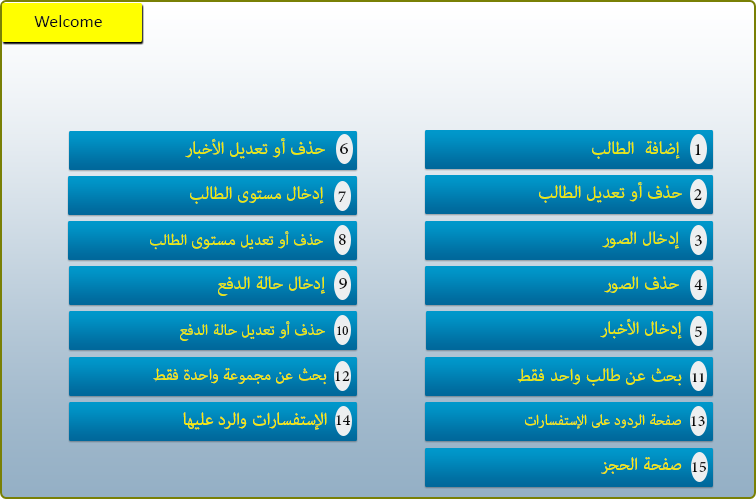
<style>
.page{position:relative;width:756px;height:500px}
.page>*{position:absolute;margin:0}
.t1{font:18px "Calibri";color:#0f0f0f}
.t2{font:24px "AdobeArabic-Regular";color:#eeeb07}
.t3{font:24px "AdobeArabic-Regular";color:#0f0f0f}
.t4{font:24px "AdobeArabic-Regular";color:#121212}
.t5{font:24px "AdobeArabic-Regular";color:#232323}
.t6{font:24px "AdobeArabic-Regular"}
.t7{font:21px "AdobeArabic-Regular";color:#eeeb07}
.t8{font:24px "AdobeArabic-Regular";color:#151515}
.t9{font:24px "AdobeArabic-Regular";color:#181818}
.t10{font:24px "AdobeArabic-Regular";color:#0c0c0c}
.t11{font:18px "AdobeArabic-Regular";color:#141414}
.t12{font:24px "AdobeArabic-Regular";color:#1d1d1d}
.t13{font:22px "AdobeArabic-Regular";color:#f9eb06}
.t14{font:22px "AdobeArabic-Regular";color:#0e0e0e}
.t15{font:20px "AdobeArabic-Bold";color:#0f0f0f}
.t16{font:24px "AdobeArabic-Regular";color:#f9eb06}
.t17{font:20px "AdobeArabic-Regular";color:#f9eb06}
.t18{font:22px "AdobeArabic-Regular";color:#111111}
.t19{font:22px "AdobeArabic-Regular";color:#161616}
</style>
<div class="page">
<p class="t1" style="left:34px;top:15px;width:68px;height:12px">Welcome</p>
<p class="t2" style="left:185px;top:138px;width:140px;height:21px">حذف أو تعديل الأخبار</p>
<p class="t3" style="left:340px;top:143px;width:8px;height:11px">6</p>
<p class="t2" style="left:592px;top:141px;width:88px;height:18px">إضافة  الطالب</p>
<p class="t4" style="left:695px;top:144px;width:6px;height:11px">1</p>
<p class="t2" style="left:539px;top:182px;width:143px;height:21px">حذف أو تعديل الطالب</p>
<p class="t2" style="left:190px;top:186px;width:134px;height:18px">إدخال مستوى الطالب</p>
<p class="t5" style="left:338px;top:191px;width:8px;height:11px">7</p>
<p class="t6" style="left:694px;top:189px;width:8px;height:11px">2</p>
<p class="t7" style="left:150px;top:231px;width:173px;height:19px">حذف أو تعديل <span class="t2">مستوى</span> الطالب</p>
<p class="t2" style="left:602px;top:231px;width:77px;height:18px">إدخال الصور</p>
<p class="t8" style="left:339px;top:234px;width:7px;height:11px">8</p>
<p class="t8" style="left:695px;top:235px;width:7px;height:11px">3</p>
<p class="t2" style="left:218px;top:276px;width:107px;height:20px">إدخال حالة الدفع</p>
<p class="t9" style="left:339px;top:278px;width:8px;height:11px">9</p>
<p class="t2" style="left:604px;top:276px;width:75px;height:17px">حذف الصور</p>
<p class="t10" style="left:694px;top:279px;width:9px;height:11px">4</p>
<p class="t2" style="left:600px;top:318px;width:82px;height:21px">إدخال الأخبار</p>
<p class="t7" style="left:180px;top:321px;width:145px;height:20px">حذف أو تعديل حالة الدفع</p>
<p class="t11" style="left:337px;top:326px;width:11px;height:9px">10</p>
<p class="t12" style="left:694px;top:326px;width:8px;height:11px">5</p>
<p class="t13" style="left:153px;top:368px;width:174px;height:17px">بحث عن مجموعة واحدة فقط</p>
<p class="t14" style="left:335px;top:371px;width:15px;height:10px">12</p>
<p class="t2" style="left:517px;top:367px;width:165px;height:19px">بحث عن طالب واحد فقط</p>
<p class="t15" style="left:692px;top:373px;width:12px;height:9px">11</p>
<p class="t16" style="left:183px;top:412px;width:144px;height:18px">الإستفسارات والرد عليها</p>
<p class="t17" style="left:525px;top:414px;width:156px;height:15px">صفحة الردود على الإستفسارات</p>
<p class="t14" style="left:336px;top:415px;width:15px;height:10px">14</p>
<p class="t18" style="left:691px;top:416px;width:14px;height:10px">13</p>
<p class="t16" style="left:601px;top:457px;width:81px;height:17px">صفحة الحجز</p>
<p class="t19" style="left:692px;top:462px;width:14px;height:10px">15</p>
</div>
